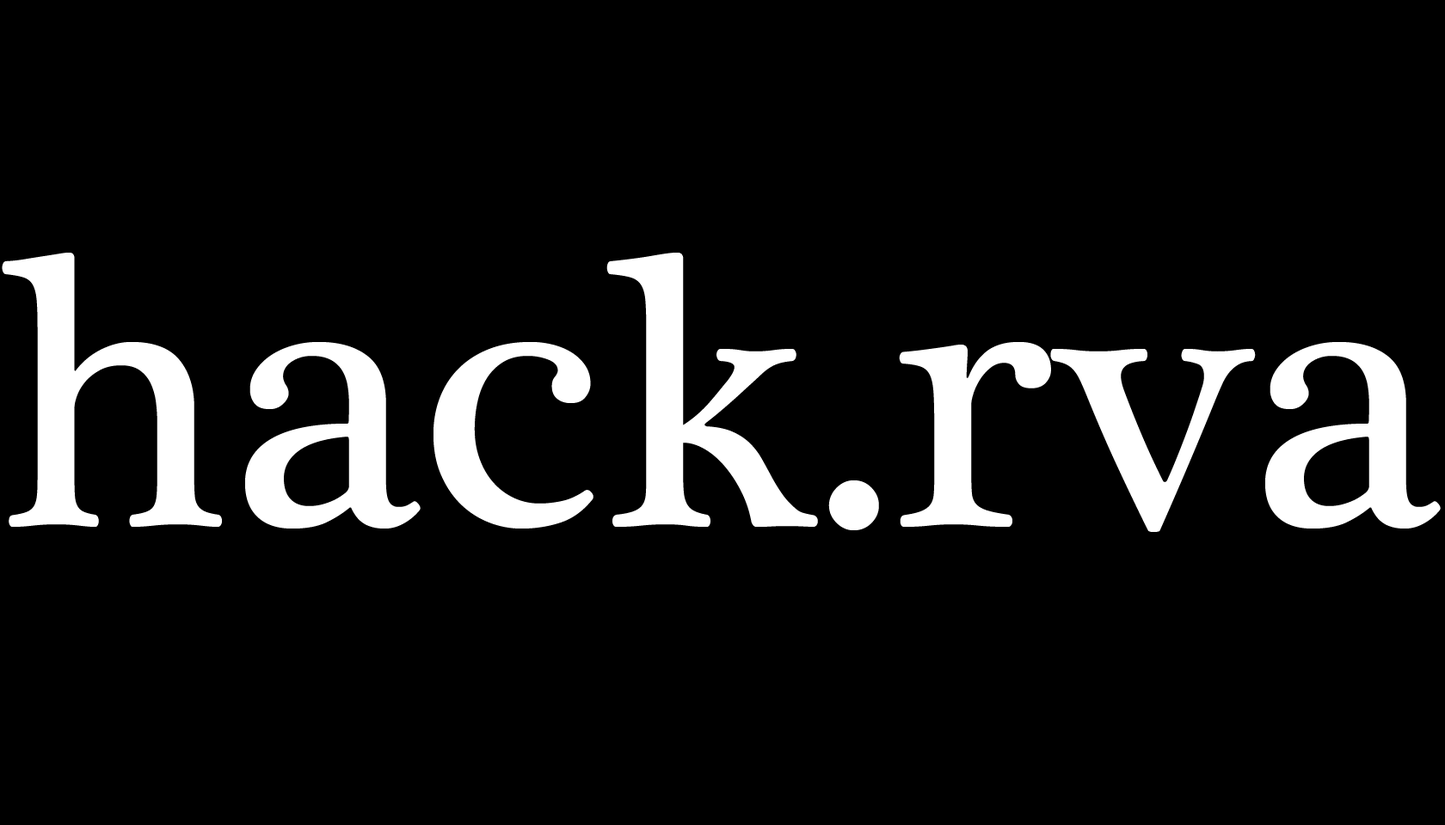
<style>
.page{position:relative;width:1445px;height:825px;background:#000000}
.page>*{position:absolute;margin:0}
.t1{font:391.2px "PlantagenetCherokee";color:#ffffff}
</style>
<div class="page">
<p class="t1" style="left:2px;top:253px;width:1438px;height:279px">hack.rva</p>
</div>
